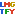
<style>
.page{position:relative;width:16px;height:16px;background:#ffffff}
.page>*{position:absolute;margin:0}
.t1{font:8px "Silkscreen-Bold";color:#2259d0}
.t2{font:8px "Silkscreen-Bold";color:#dc412b}
.t3{font:8px "Silkscreen-Bold";color:#c09b03}
.t4{font:8px "Silkscreen-Bold";color:#199f20}
</style>
<div class="page">
<p class="t1" style="left:0px;top:2px;width:4px;height:5px">L</p>
<p class="t2" style="left:4px;top:2px;width:6px;height:5px">M</p>
<p class="t3" style="left:10px;top:2px;width:5px;height:5px">G</p>
<p class="t1" style="left:0px;top:9px;width:4px;height:5px">T</p>
<p class="t4" style="left:5px;top:9px;width:4px;height:5px">F</p>
<p class="t2" style="left:9px;top:9px;width:6px;height:5px">Y</p>
</div>
